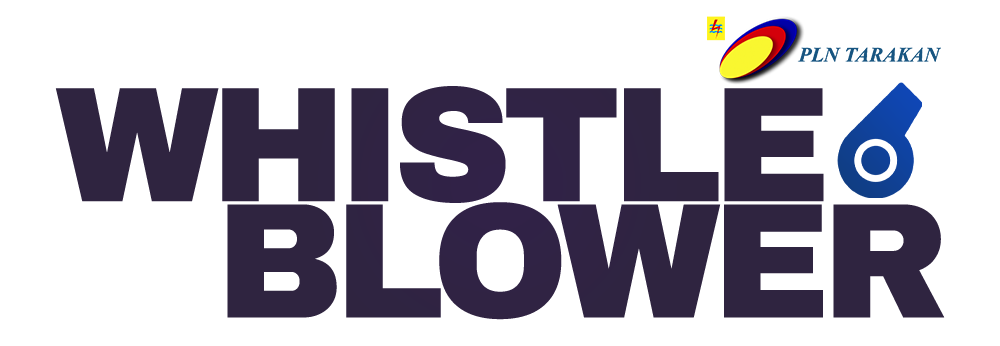
<style>
.page{position:relative;width:1000px;height:346px;background:#ffffff}
.page>*{position:absolute;margin:0}
.t1{font:163.7px "ArchivoBlack-Regular";letter-spacing:-0.08em;color:#2f2440;font-weight:bold}
</style>
<div class="page">
<p class="t1" style="left:55px;top:86px;width:769px;height:117px">WHISTLE</p>
<p class="t1" style="left:227px;top:202px;width:718px;height:118px">BLOWER</p>
</div>
